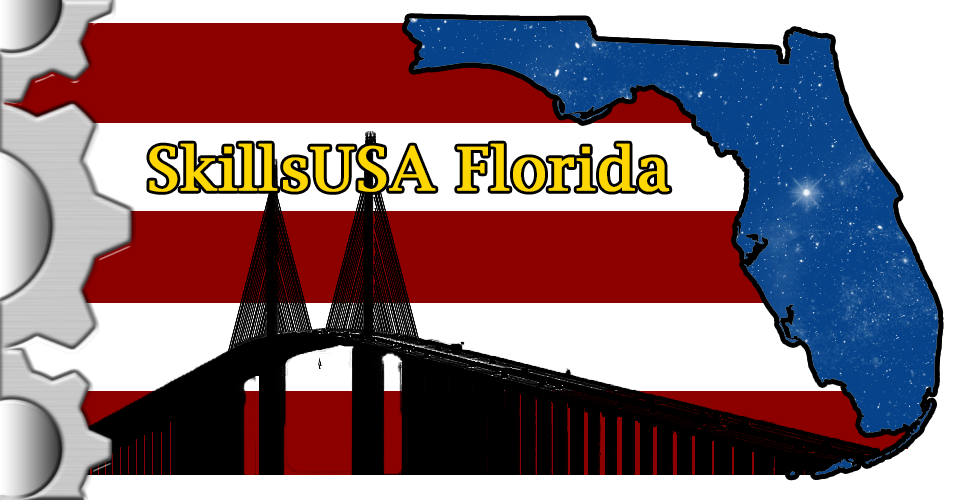
<style>
.page{position:relative;width:954px;height:500px;background:#ffffff}
.page>*{position:absolute;margin:0}
.t1{font:60px "LucidaBright";color:#ffd700;font-weight:bold}
</style>
<div class="page">
<p class="t1" style="left:149px;top:143px;width:521px;height:49px">SkillsUSA Florida</p>
</div>
